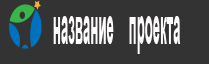
<style>
.page{position:relative;width:209px;height:64px;background:#333333}
.page>*{position:absolute;margin:0}
.t1{font:51.8px "Arial-BoldMT";color:#fefcfc;scale:0.26 1}
</style>
<div class="page">
<p class="t1" style="left:53px;top:16px;width:128px;height:38px">название    проекта</p>
</div>
